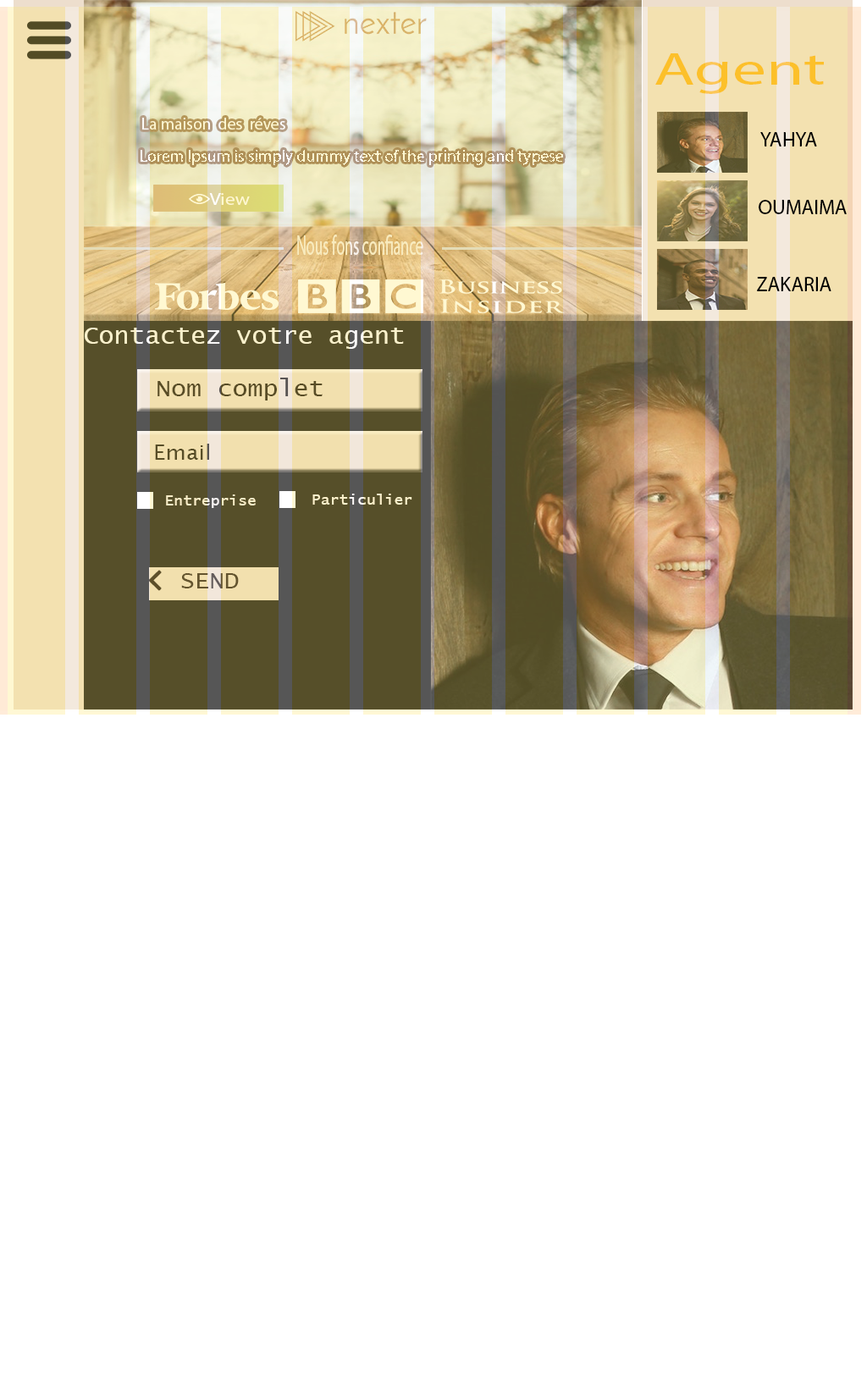
<style>
.page{position:relative;width:867px;height:1375px;background:#ffffff}
.page>*{position:absolute;margin:0}
.t1{font:45.5px "MyriadPro-Regular";color:#fcc02a;scale:1.48 1}
.t2{font:16.6px "MyriadPro-Regular";color:#fff8d2}
.t3{font:20.3px "MyriadPro-Regular";color:#000000}
.t4{font:17.4px "MyriadPro-Regular";color:#fff8d2;scale:1.14 1}
.t5{font:28px "MyriadPro-Regular";color:#f8ebbe;scale:0.54 1}
.t6{font:25.4px "LucidaConsole";color:#faf1cc}
.t7{font:23.8px "LucidaConsole";color:#584c26;scale:1.07 1}
.t8{font:20.7px "LucidaSans";color:#574d27;scale:1.07 1}
.t9{font:14.3px "LucidaConsole";color:#f9edc7;scale:1.07 1}
.t10{font:14.3px "LucidaConsole";color:#fdf1cc;scale:1.07 1}
.t11{font:23.8px "LucidaConsole";color:#64542e;scale:1.03 1}
</style>
<div class="page">
<p class="t1" style="left:655px;top:53px;width:169px;height:41px">Agent</p>
<p class="t2" style="left:142px;top:118px;width:143px;height:12px">La maison  des  réves</p>
<p class="t3" style="left:760px;top:132px;width:57px;height:14px">YAHYA</p>
<p class="t2" style="left:141px;top:150px;width:422px;height:15px">Lorem Ipsum is simply dummy text of the printing and typese</p>
<p class="t4" style="left:209px;top:193px;width:41px;height:12px">View</p>
<p class="t3" style="left:759px;top:200px;width:88px;height:14px">OUMAIMA</p>
<p class="t5" style="left:297px;top:235px;width:126px;height:20px">Nous fons confiance</p>
<p class="t3" style="left:757px;top:277px;width:75px;height:14px">ZAKARIA</p>
<p class="t6" style="left:85px;top:328px;width:319px;height:21px">Contactez votre agent</p>
<p class="t7" style="left:158px;top:378px;width:165px;height:23px">Nom complet</p>
<p class="t8" style="left:155px;top:444px;width:54px;height:16px">Email</p>
<p class="t9" style="left:166px;top:495px;width:90px;height:13px">Entreprise</p>
<p class="t10" style="left:312px;top:494px;width:100px;height:11px">Particulier</p>
<p class="t11" style="left:181px;top:573px;width:58px;height:16px">SEND</p>
</div>
